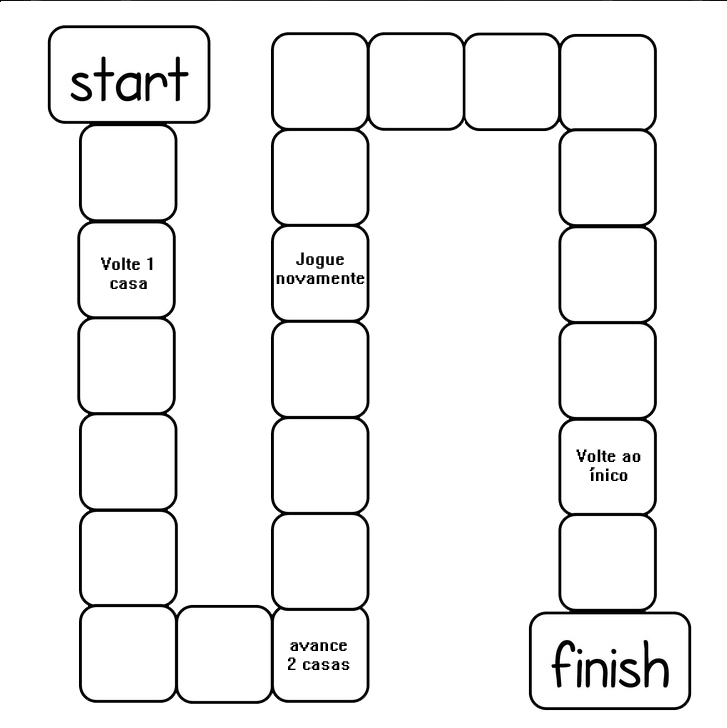
<style>
.page{position:relative;width:727px;height:728px;background:#ffffff}
.page>*{position:absolute;margin:0}
.t1{font:16px "System"}
.t2{font:16px "System";color:#000000}
</style>
<div class="page">
<p class="t1" style="left:101px;top:256px;width:52px;height:32px;text-align:center">Volte 1 casa</p>
<p class="t2" style="left:276px;top:251px;width:89px;height:32px;text-align:center">Jogue novamente</p>
<p class="t2" style="left:576px;top:448px;width:65px;height:32px;text-align:center">Volte ao ínico</p>
<p class="t1" style="left:288px;top:641px;width:62px;height:28px;text-align:center">avance 2 casas</p>
</div>
